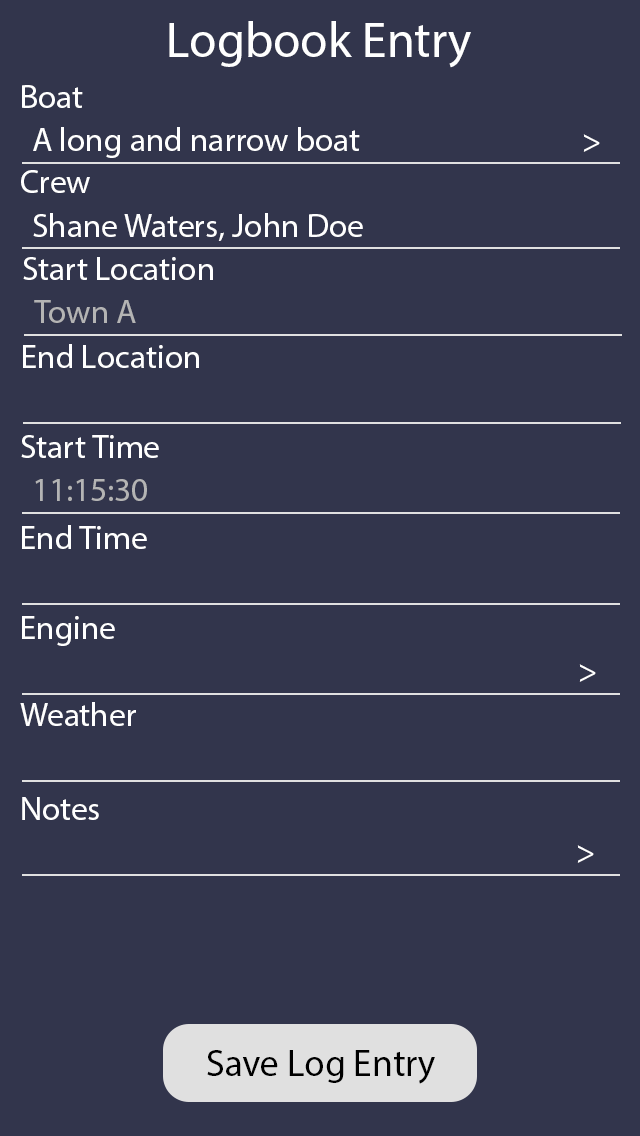
<style>
.page{position:relative;width:640px;height:1136px;background:#32354c}
.page>*{position:absolute;margin:0}
.t1{font:50px "MyriadPro-Regular";color:#ffffff}
.t2{font:33.3px "MyriadPro-Regular";color:#ffffff}
.t3{font:33.3px "MyriadPro-Regular";color:#b4b4b4}
.t4{font:37.5px "MyriadPro-Regular";color:#000000}
</style>
<div class="page">
<p class="t1" style="left:169px;top:21px;width:302px;height:47px">Logbook Entry</p>
<p class="t2" style="left:22px;top:85px;width:61px;height:23px">Boat</p>
<p class="t2" style="left:33px;top:127px;width:327px;height:31px">A long and narrow boat</p>
<p class="t2" style="left:583px;top:134px;width:17px;height:18px">&gt;</p>
<p class="t2" style="left:21px;top:170px;width:69px;height:23px">Crew</p>
<p class="t2" style="left:33px;top:213px;width:330px;height:28px">Shane Waters, John Doe</p>
<p class="t2" style="left:23px;top:257px;width:190px;height:23px">Start Location</p>
<p class="t3" style="left:34px;top:300px;width:102px;height:23px">Town A</p>
<p class="t2" style="left:23px;top:344px;width:176px;height:24px">End Location</p>
<p class="t2" style="left:21px;top:435px;width:138px;height:23px">Start Time</p>
<p class="t3" style="left:35px;top:479px;width:112px;height:22px">11:15:30</p>
<p class="t2" style="left:22px;top:525px;width:125px;height:24px">End Time</p>
<p class="t2" style="left:22px;top:616px;width:93px;height:30px">Engine</p>
<p class="t2" style="left:579px;top:664px;width:17px;height:18px">&gt;</p>
<p class="t2" style="left:20px;top:702px;width:116px;height:24px">Weather</p>
<p class="t2" style="left:22px;top:797px;width:77px;height:23px">Notes</p>
<p class="t2" style="left:577px;top:845px;width:17px;height:18px">&gt;</p>
<p class="t4" style="left:207px;top:1050px;width:228px;height:34px">Save Log Entry</p>
</div>
